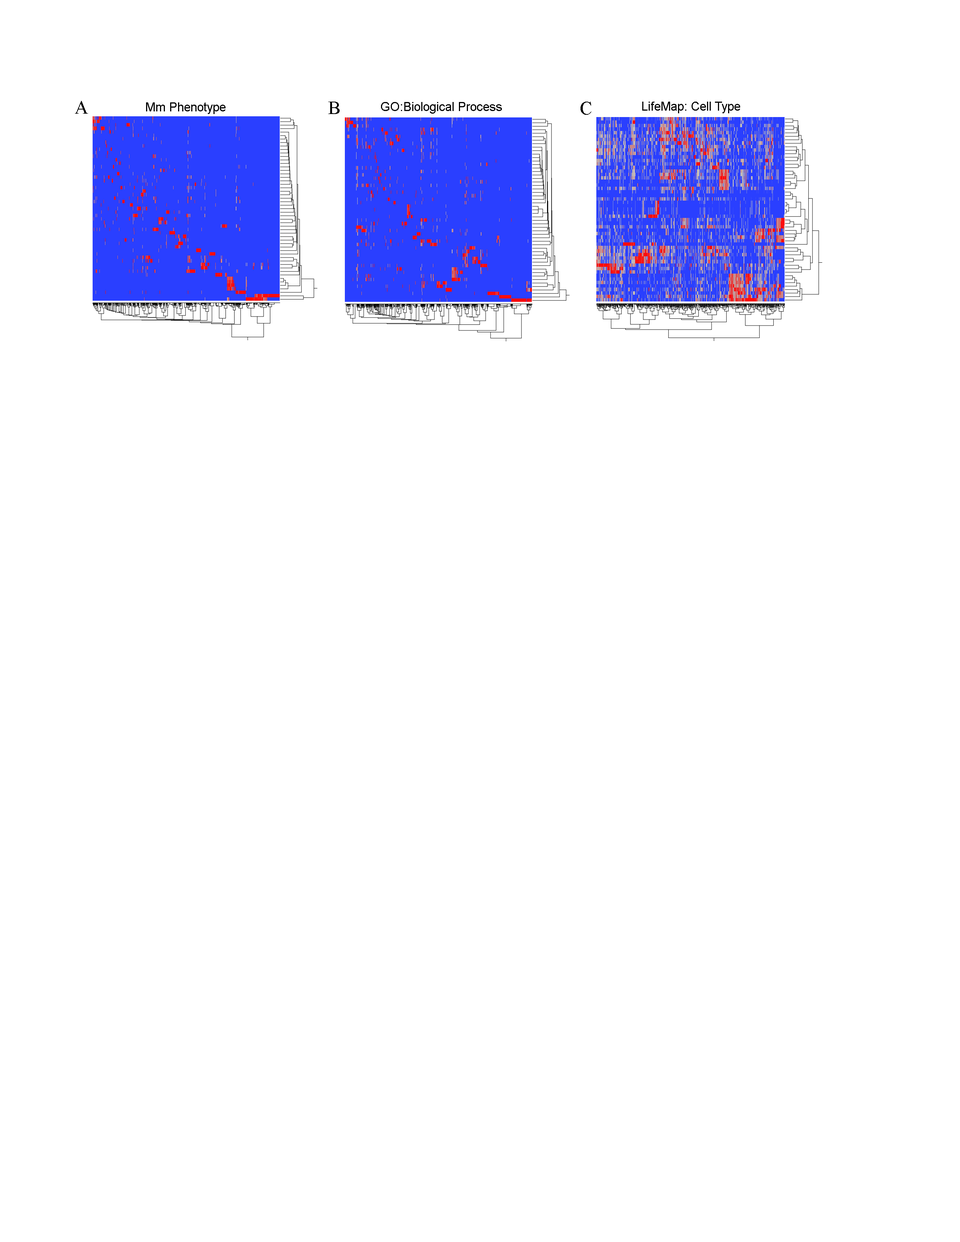
<style>
.page{position:relative;width:960px;height:1242px;background:#ffffff}
.page>*{position:absolute;margin:0}
.t1{font:18.8px "TimesNewRomanPSMT";color:#000000}
.t2{font:12.5px "ArialMT";color:#000000}
</style>
<div class="page">
<p class="t1" style="left:75px;top:101px;width:13px;height:13px">A</p>
<p class="t1" style="left:328px;top:102px;width:12px;height:12px">B</p>
<p class="t1" style="left:580px;top:102px;width:11px;height:13px">C</p>
<p class="t2" style="left:642px;top:102px;width:98px;height:11px">LifeMap: Cell Type</p>
<p class="t2" style="left:146px;top:102px;width:79px;height:12px">Mm Phenotype</p>
<p class="t2" style="left:381px;top:102px;width:121px;height:12px">GO:Biological Process</p>
</div>
